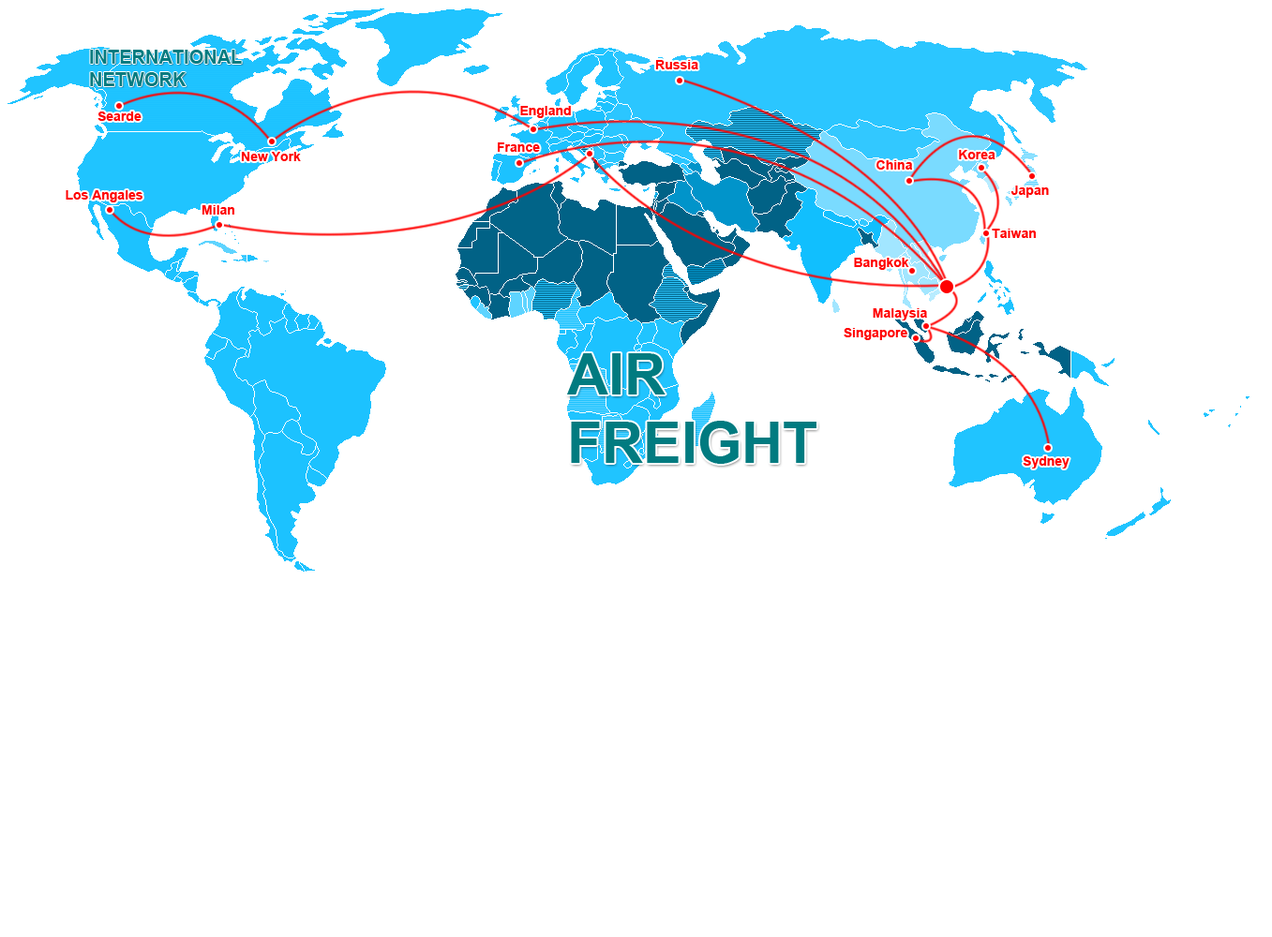
<style>
.page{position:relative;width:1272px;height:937px;background:#ffffff}
.page>*{position:absolute;margin:0}
.t1{font:18.7px "Arial-BoldMT";color:#017b80}
.t2{font:13.1px "Arial-BoldMT";color:#ff0000}
.t3{font:57px "Arial-BoldMT";color:#017b80}
</style>
<div class="page">
<p class="t1" style="left:90px;top:50px;width:152px;height:36px">INTERNATIONAL<br>NETWORK</p>
<p class="t2" style="left:655px;top:60px;width:43px;height:9px">Russia</p>
<p class="t2" style="left:97px;top:112px;width:45px;height:9px">Searde</p>
<p class="t2" style="left:520px;top:106px;width:51px;height:12px">England</p>
<p class="t2" style="left:498px;top:142px;width:42px;height:10px">France</p>
<p class="t2" style="left:959px;top:150px;width:37px;height:9px">Korea</p>
<p class="t2" style="left:241px;top:152px;width:60px;height:9px">New York</p>
<p class="t2" style="left:876px;top:160px;width:36px;height:10px">China</p>
<p class="t2" style="left:1011px;top:186px;width:38px;height:12px">Japan</p>
<p class="t2" style="left:66px;top:190px;width:76px;height:12px">Los Angales</p>
<p class="t2" style="left:202px;top:205px;width:32px;height:10px">Milan</p>
<p class="t2" style="left:992px;top:229px;width:44px;height:9px">Taiwan</p>
<p class="t2" style="left:854px;top:258px;width:55px;height:12px">Bangkok</p>
<p class="t2" style="left:873px;top:308px;width:54px;height:13px">Malaysia</p>
<p class="t2" style="left:844px;top:328px;width:63px;height:12px">Singapore</p>
<p class="t3" style="left:567px;top:353px;width:249px;height:111px">AIR<br>FREIGHT</p>
<p class="t2" style="left:1023px;top:457px;width:47px;height:12px">Sydney</p>
</div>
